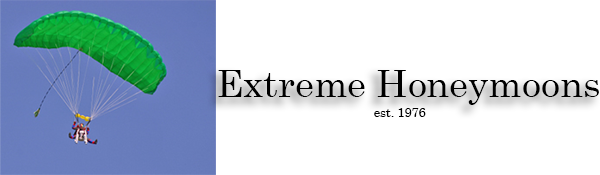
<style>
.page{position:relative;width:600px;height:175px;background:#ffffff}
.page>*{position:absolute;margin:0}
.t1{font:37.6px "CenturySchoolbook";color:#000000}
.t2{font:12.5px "CenturySchoolbook";color:#000000}
</style>
<div class="page">
<p class="t1" style="left:218px;top:70px;width:381px;height:35px">Extreme Honeymoons</p>
<p class="t2" style="left:374px;top:108px;width:52px;height:9px">est. 1976</p>
</div>
